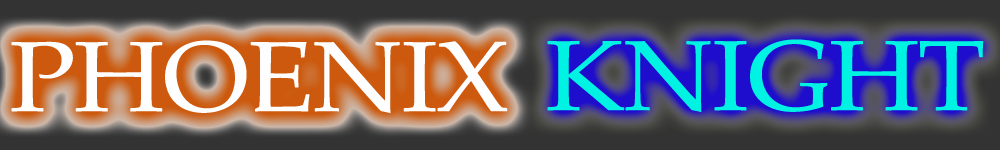
<style>
.page{position:relative;width:1000px;height:150px;background:#333333}
.page>*{position:absolute;margin:0}
.t1{font:100px "PalatinoLinotype-Roman";letter-spacing:-0.02em;color:#fefefe;scale:1.1 1}
.t2{font:100px "PalatinoLinotype-Roman";letter-spacing:-0.02em;color:#00f2e2;scale:1.1 1}
</style>
<div class="page">
<p class="t1" style="left:11px;top:40px;width:497px;height:74px">PHOENIX</p>
<p class="t2" style="left:547px;top:39px;width:437px;height:74px">KNIGHT</p>
</div>
